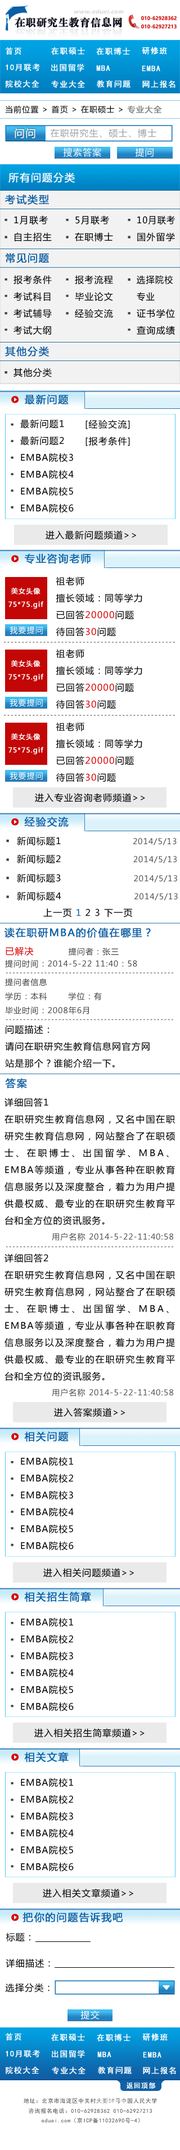
<style>
.page{position:relative;width:180px;height:2150px;background:#ffffff}
.page>*{position:absolute;margin:0}
.t1{font:7.9px "SimHei";letter-spacing:0.08em;color:#ffffff;font-weight:bold}
.t2{font:7.9px "MicrosoftYaHei";letter-spacing:0.08em;color:#000000}
.t3{font:7.9px "MicrosoftYaHei";letter-spacing:0.08em;color:#81807f;font-weight:bold}
.t4{font:10.1px "MicrosoftYaHei";letter-spacing:0.08em;color:#fcfdfd;font-weight:bold}
.t5{font:9px "MicrosoftYaHei";letter-spacing:0.08em;color:#a3a3a3}
.t6{font:9px "MicrosoftYaHei";letter-spacing:0.08em;color:#ffffff}
.t7{font:10.1px "MicrosoftYaHei";letter-spacing:0.08em;color:#ffffff;font-weight:bold}
.t8{font:10.1px "MicrosoftYaHei";letter-spacing:0.08em;color:#0e5ea3;font-weight:bold}
.t9{font:9px/16.9px "MicrosoftYaHei";letter-spacing:0.08em;color:#000000}
.t10{font:9px/16.9px "MicrosoftYaHei";letter-spacing:0.08em;color:#000000;scale:0.95 1}
.t11{font:9px "MicrosoftYaHei";letter-spacing:0.08em;color:#000000}
.t12{font:9px/16.9px "MicrosoftYaHei";letter-spacing:0.08em;color:#d90101}
.t13{font:6.8px/13.5px "MicrosoftYaHei";letter-spacing:0.08em;color:#ffffff;font-weight:bold}
.t14{font:7.9px "MicrosoftYaHei";letter-spacing:0.08em;color:#ffffff}
.t15{font:7.9px "MicrosoftYaHei";letter-spacing:0.08em;color:#4a4949}
.t16{font:9px "MicrosoftYaHei";letter-spacing:0.08em;color:#0e5ea3}
.t17{font:7.9px/14.1px "MicrosoftYaHei";letter-spacing:0.08em;color:#434343}
.t18{font:9px/14.1px "MicrosoftYaHei";letter-spacing:0.08em;color:#d90101}
.t19{font:7.9px/16.9px "MicrosoftYaHei";letter-spacing:0.08em;color:#4f4e4e}
.t20{font:6.8px "SimHei";letter-spacing:0.08em;color:#ffffff;font-weight:bold}
.t21{font:5.6px/10.1px "SimHei";letter-spacing:0.08em;color:#4a4949}
.t22{font:5.6px "SimHei";letter-spacing:0.08em;color:#4a4949}
</style>
<div class="page">
<p class="t1" style="left:5px;top:47px;width:16px;height:8px">首页</p>
<p class="t1" style="left:51px;top:47px;width:34px;height:8px">在职硕士</p>
<p class="t1" style="left:96px;top:47px;width:34px;height:8px">在职博士</p>
<p class="t1" style="left:142px;top:47px;width:25px;height:8px">研修班</p>
<p class="t1" style="left:6px;top:64px;width:34px;height:7px">10月联考</p>
<p class="t1" style="left:51px;top:64px;width:33px;height:7px">出国留学</p>
<p class="t1" style="left:96px;top:65px;width:14px;height:6px">MBA</p>
<p class="t1" style="left:142px;top:65px;width:18px;height:6px">EMBA</p>
<p class="t1" style="left:6px;top:80px;width:33px;height:8px">院校大全</p>
<p class="t1" style="left:51px;top:80px;width:34px;height:8px">专业大全</p>
<p class="t1" style="left:97px;top:80px;width:33px;height:8px">教育问题</p>
<p class="t1" style="left:142px;top:80px;width:34px;height:8px">网上报名</p>
<p class="t2" style="left:5px;top:105px;width:157px;height:9px">当前位置 &gt; 首页 &gt; 在职硕士 &gt; <span class="t3">专业大全</span></p>
<p class="t4" style="left:15px;top:128px;width:20px;height:10px">问问</p>
<p class="t5" style="left:50px;top:129px;width:106px;height:9px">在职研究生、硕士、博士</p>
<p class="t6" style="left:63px;top:148px;width:38px;height:9px">搜索答案</p>
<p class="t6" style="left:135px;top:148px;width:19px;height:9px">提问</p>
<p class="t7" style="left:8px;top:173px;width:67px;height:10px">所有问题分类</p>
<p class="t8" style="left:5px;top:195px;width:44px;height:10px">考试类型</p>
<p class="t9" style="left:14px;top:215px;width:38px;height:27px">1月联考<br>自主招生</p>
<p class="t9" style="left:75px;top:215px;width:38px;height:27px">5月联考<br>在职博士</p>
<p class="t10" style="left:137px;top:215px;width:38px;height:26px">10月联考<br><span class="t9">国外留学</span></p>
<p class="t8" style="left:6px;top:253px;width:43px;height:10px">常见问题</p>
<p class="t9" style="left:14px;top:275px;width:38px;height:60px">报考条件<br>考试科目<br>考试辅导<br>考试大纲</p>
<p class="t9" style="left:75px;top:275px;width:38px;height:43px">报考流程<br>毕业论文<br>经验交流</p>
<p class="t9" style="left:137px;top:275px;width:38px;height:60px"><span class="t10">选择院校<br>专业<br></span>证书学位<br>查询成绩</p>
<p class="t8" style="left:5px;top:346px;width:44px;height:11px">其他分类</p>
<p class="t11" style="left:14px;top:368px;width:38px;height:9px">其他分类</p>
<p class="t8" style="left:24px;top:394px;width:45px;height:10px">最新问题</p>
<p class="t9" style="left:20px;top:419px;width:54px;height:94px">最新问题1<br>最新问题2<br>EMBA院校3<br>EMBA院校4<br>EMBA院校5<br>EMBA院校6</p>
<p class="t9" style="left:86px;top:420px;width:44px;height:26px">[经验交流]<br>[报考条件]</p>
<p class="t11" style="left:46px;top:530px;width:90px;height:10px">进入最新问题频道&gt;&gt;</p>
<p class="t8" style="left:25px;top:554px;width:66px;height:10px">专业咨询老师</p>
<p class="t9" style="left:56px;top:577px;width:86px;height:59px">祖老师<br>擅长领域：同等学力<br>已回答<span class="t12">20000</span>问题<br>待回答<span class="t12">30</span>问题</p>
<p class="t13" style="left:8px;top:588px;width:35px;height:21px;text-align:center">美女头像<br>75*75.gif</p>
<p class="t14" style="left:10px;top:626px;width:33px;height:8px">我要提问</p>
<p class="t9" style="left:56px;top:649px;width:86px;height:60px">祖老师<br>擅长领域：同等学力<br>已回答<span class="t12">20000</span>问题<br>待回答<span class="t12">30</span>问题</p>
<p class="t13" style="left:8px;top:660px;width:35px;height:22px;text-align:center">美女头像<br>75*75.gif</p>
<p class="t14" style="left:10px;top:699px;width:33px;height:8px">我要提问</p>
<p class="t9" style="left:56px;top:722px;width:86px;height:60px">祖老师<br>擅长领域：同等学力<br>已回答<span class="t12">20000</span>问题<br>待回答<span class="t12">30</span>问题</p>
<p class="t13" style="left:8px;top:734px;width:35px;height:21px;text-align:center">美女头像<br>75*75.gif</p>
<p class="t14" style="left:10px;top:772px;width:33px;height:8px">我要提问</p>
<p class="t11" style="left:35px;top:793px;width:110px;height:10px">进入专业咨询老师频道&gt;&gt;</p>
<p class="t8" style="left:24px;top:817px;width:45px;height:10px">经验交流</p>
<p class="t15" style="left:17px;top:836px;width:160px;height:10px"><span class="t11">新闻标题1                    </span>2014/5/13</p>
<p class="t15" style="left:17px;top:854px;width:160px;height:10px"><span class="t11">新闻标题2                   </span>2014/5/13</p>
<p class="t15" style="left:17px;top:874px;width:160px;height:9px"><span class="t11">新闻标题3                    </span>2014/5/13</p>
<p class="t15" style="left:17px;top:892px;width:161px;height:9px"><span class="t11">新闻标题4                   </span>2014/5/13</p>
<p class="t11" style="left:43px;top:908px;width:89px;height:9px">上一页 <span class="t16">1</span> 2 3 下一页</p>
<p class="t8" style="left:4px;top:928px;width:147px;height:10px">读在职研MBA的价值在哪里？</p>
<p class="t17" style="left:5px;top:947px;width:145px;height:121px"><span class="t18">已解决         </span>提问者：张三<br>提问时间：2014-5-22 11:40：58<br><br>提问者信息<br>学历：本科       学位：有<br>毕业时间：2008年6月<br><br><span class="t9">问题描述：<br>请问在职研究生教育信息网官方网<br>站是那个？谁能介绍一下。</span></p>
<p class="t8" style="left:5px;top:1078px;width:22px;height:10px">答案</p>
<p class="t9" style="left:4px;top:1098px;width:171px;height:143px;text-align:justify">详细回答1<br>在职研究生教育信息网，又名中国在职研究生教育信息网，网站整合了在职硕士、在职博士、出国留学、MBA、EMBA等频道，专业从事各种在职教育信息服务以及深度整合，着力为用户提供最权威、最专业的在职研究生教育平台和全方位的资讯服务。<br><span class="t19">                用户名称 2014-5-22-11:40:58</span></p>
<p class="t9" style="left:4px;top:1254px;width:171px;height:143px;text-align:justify">详细回答2<br>在职研究生教育信息网，又名中国在职研究生教育信息网，网站整合了在职硕士、在职博士、出国留学、MBA、EMBA等频道，专业从事各种在职教育信息服务以及深度整合，着力为用户提供最权威、最专业的在职研究生教育平台和全方位的资讯服务。<br><span class="t19">                用户名称 2014-5-22-11:40:58</span></p>
<p class="t11" style="left:54px;top:1408px;width:71px;height:10px">进入答案频道&gt;&gt;</p>
<p class="t8" style="left:24px;top:1432px;width:45px;height:10px">相关问题</p>
<p class="t9" style="left:21px;top:1457px;width:53px;height:94px">EMBA院校1<br>EMBA院校2<br>EMBA院校3<br>EMBA院校4<br>EMBA院校5<br>EMBA院校6</p>
<p class="t11" style="left:43px;top:1568px;width:91px;height:10px">进入相关问题频道&gt;&gt;</p>
<p class="t8" style="left:24px;top:1592px;width:67px;height:11px">相关招生简章</p>
<p class="t9" style="left:21px;top:1618px;width:53px;height:94px">EMBA院校1<br>EMBA院校2<br>EMBA院校3<br>EMBA院校4<br>EMBA院校5<br>EMBA院校6</p>
<p class="t11" style="left:34px;top:1729px;width:111px;height:9px">进入相关招生简章频道&gt;&gt;</p>
<p class="t8" style="left:24px;top:1752px;width:45px;height:11px">相关文章</p>
<p class="t9" style="left:21px;top:1778px;width:53px;height:94px">EMBA院校1<br>EMBA院校2<br>EMBA院校3<br>EMBA院校4<br>EMBA院校5<br>EMBA院校6</p>
<p class="t11" style="left:43px;top:1889px;width:90px;height:9px">进入相关文章频道&gt;&gt;</p>
<p class="t8" style="left:22px;top:1912px;width:101px;height:11px">把你的问题告诉我吧</p>
<p class="t11" style="left:6px;top:1933px;width:24px;height:9px">标题：</p>
<p class="t11" style="left:6px;top:1959px;width:44px;height:9px">详细描述：</p>
<p class="t11" style="left:5px;top:1983px;width:45px;height:10px">选择分类：</p>
<p class="t6" style="left:80px;top:2011px;width:20px;height:9px">提交</p>
<p class="t1" style="left:5px;top:2033px;width:16px;height:8px">首页</p>
<p class="t1" style="left:142px;top:2033px;width:26px;height:8px">研修班</p>
<p class="t1" style="left:51px;top:2034px;width:34px;height:8px">在职硕士</p>
<p class="t1" style="left:97px;top:2034px;width:33px;height:8px">在职博士</p>
<p class="t1" style="left:6px;top:2050px;width:34px;height:8px">10月联考</p>
<p class="t1" style="left:52px;top:2050px;width:33px;height:8px">出国留学</p>
<p class="t1" style="left:97px;top:2052px;width:14px;height:6px">MBA</p>
<p class="t1" style="left:143px;top:2052px;width:18px;height:6px">EMBA</p>
<p class="t1" style="left:6px;top:2067px;width:33px;height:7px">院校大全</p>
<p class="t1" style="left:52px;top:2067px;width:34px;height:7px">专业大全</p>
<p class="t1" style="left:98px;top:2067px;width:34px;height:7px">教育问题</p>
<p class="t1" style="left:143px;top:2067px;width:33px;height:8px">网上报名</p>
<p class="t20" style="left:127px;top:2082px;width:28px;height:7px">返回顶部</p>
<p class="t21" style="left:24px;top:2098px;width:133px;height:16px;text-align:center">地址：北京市海淀区中关村大街59号中国人民大学<br>咨询报名电话：010-62928362 010-62927213</p>
<p class="t22" style="left:42px;top:2118px;width:98px;height:5px">eduei.com（京ICP备11032690号-4）</p>
</div>
